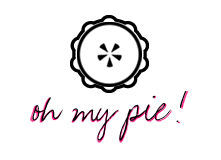
<style>
.page{position:relative;width:221px;height:160px;background:#ffffff}
.page>*{position:absolute;margin:0}
.t1{font:60px "BeerDip";letter-spacing:-0.05em;color:#000000}
</style>
<div class="page">
<p class="t1" style="left:32px;top:91px;width:155px;height:50px">oh my pie!</p>
</div>
